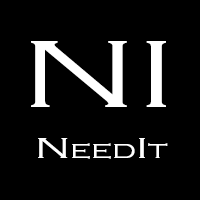
<style>
.page{position:relative;width:200px;height:200px;background:#000000}
.page>*{position:absolute;margin:0}
.t1{font:99px "CopperplateGothic-Light";color:#ffffff;font-variant:small-caps;scale:1.39 1}
.t2{font:30px "CopperplateGothic-Light";color:#ffffff;font-variant:small-caps;scale:1.39 1}
</style>
<div class="page">
<p class="t1" style="left:31px;top:41px;width:135px;height:66px">NI</p>
<p class="t2" style="left:38px;top:138px;width:130px;height:21px">NeedIt</p>
</div>
